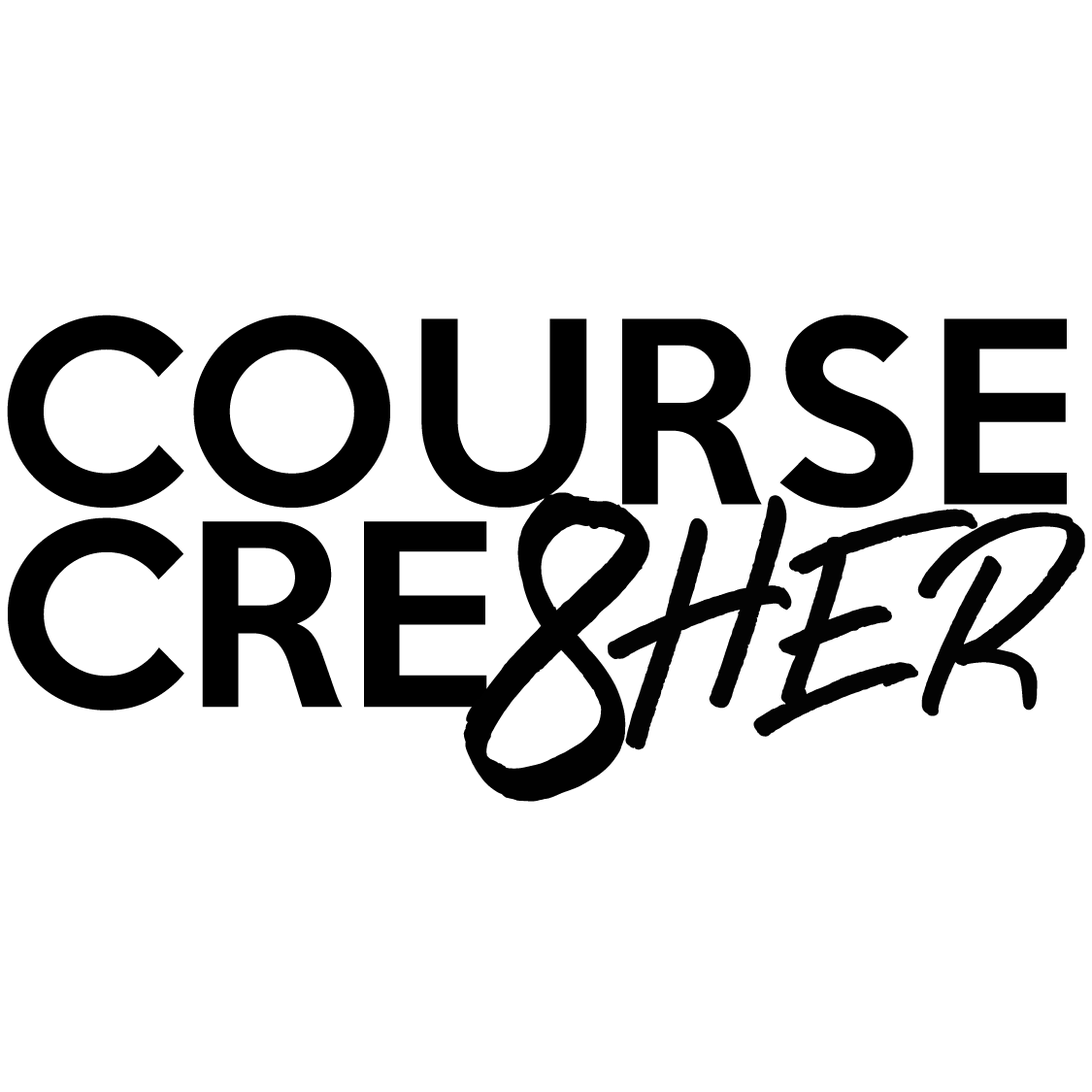
<style>
.page{position:relative;width:1092px;height:1092px;background:#ffffff}
.page>*{position:absolute;margin:0}
.t1{font:231.6px "KeepCalm-Medium";letter-spacing:0.025em;color:#000000}
.t2{font:439px "PerfectSunset-Regular";color:#010101;font-weight:bold;scale:0.77 1}
.t3{font:231.6px "PerfectSunset-Regular";color:#030303;font-weight:bold}
.t4{font:231.6px "KeepCalm-Medium";color:#000000}
</style>
<div class="page">
<p class="t1" style="left:7px;top:314px;width:1060px;height:194px">COURSE</p>
<p class="t2" style="left:463px;top:492px;width:187px;height:310px;rotate:1deg">8</p>
<p class="t3" style="left:608px;top:495px;width:477px;height:255px">HER</p>
<p class="t4" style="left:8px;top:517px;width:479px;height:194px">CRE</p>
</div>
